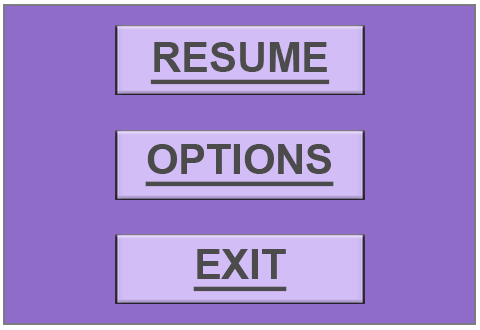
<style>
.page{position:relative;width:480px;height:330px;background:#8f6bca}
.page>*{position:absolute;margin:0}
.t1{font:41.7px "Arial-BoldMT";color:#4c4c4c;text-decoration:underline}
</style>
<div class="page">
<p class="t1" style="left:150px;top:42px;width:180px;height:43px">RESUME</p>
<p class="t1" style="left:193px;top:249px;width:94px;height:43px">EXIT</p>
</div>
